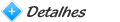
<style>
.page{position:relative;width:120px;height:22px;background:#ffffff}
.page>*{position:absolute;margin:0}
.t1{font:16px "BlacklightD";color:#333333}
</style>
<div class="page">
<p class="t1" style="left:27px;top:6px;width:60px;height:12px">Detalhes</p>
</div>
